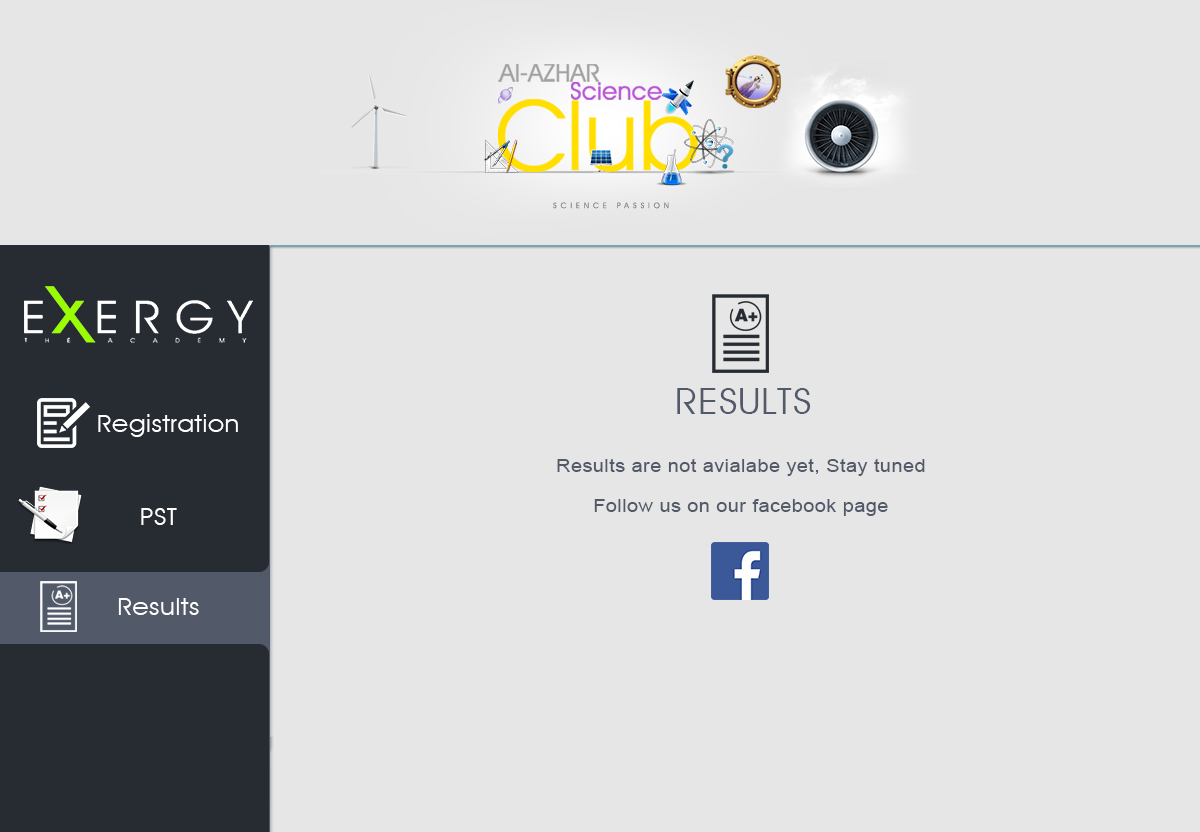
<style>
.page{position:relative;width:1200px;height:832px;background:#e6e6e6}
.page>*{position:absolute;margin:0}
.t1{font:36px "AvantGardeITCbyBT-Book";letter-spacing:0.025em;color:#525a69;text-transform:uppercase;scale:1.1 1}
.t2{font:24px "AvantGardeITCbyBT-Book";letter-spacing:0.025em;color:#ffffff;scale:1.1 1}
.t3{font:18px "ArialMT";letter-spacing:0.025em;color:#525a69;scale:1.1 1}
</style>
<div class="page">
<p class="t1" style="left:677px;top:388px;width:134px;height:26px">RESULTS</p>
<p class="t2" style="left:98px;top:414px;width:140px;height:23px">Registration</p>
<p class="t3" style="left:557px;top:458px;width:368px;height:18px">Results are not avialabe yet, Stay tuned</p>
<p class="t2" style="left:141px;top:508px;width:36px;height:17px">PST</p>
<p class="t3" style="left:594px;top:499px;width:294px;height:17px">Follow us on our facebook page</p>
<p class="t2" style="left:118px;top:598px;width:81px;height:17px">Results</p>
</div>
